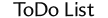
<style>
.page{position:relative;width:108px;height:18px;background:#ffffff}
.page>*{position:absolute;margin:0}
.t1{font:20px "Amira-Roman";color:#000000}
</style>
<div class="page">
<p class="t1" style="left:13px;top:2px;width:82px;height:15px;opacity:0.96">ToDo List</p>
</div>
